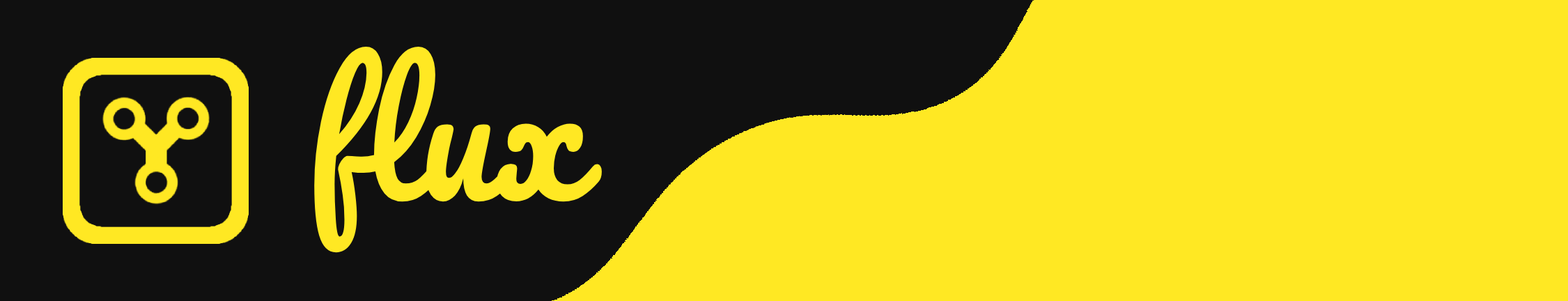
<style>
.page{position:relative;width:1568px;height:301px;background:#ffe823}
.page>*{position:absolute;margin:0}
.t1{font:163.7px "Pacifico-Regular";color:#ffe823}
</style>
<div class="page">
<p class="t1" style="left:314px;top:47px;width:288px;height:206px">flux</p>
</div>
